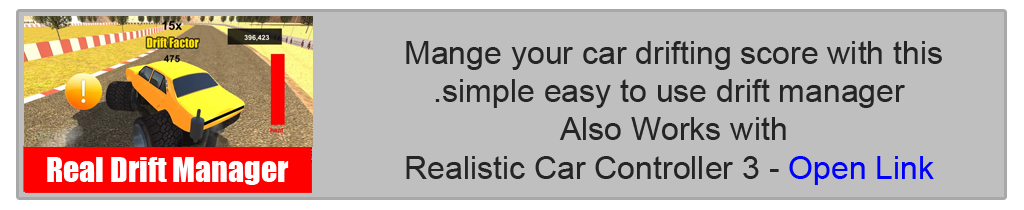
<style>
.page{position:relative;width:1024px;height:210px;background:#bfbfbf}
.page>*{position:absolute;margin:0}
.t1{font:32px "ArialMT";color:#252525}
.t2{font:32px "ArialMT";color:#0000ff}
.t3{font:32px "Impact";color:#ffffff}
</style>
<div class="page">
<p class="t1" style="left:406px;top:41px;width:536px;height:144px;text-align:center">Mange your car drifting score with this <br>simple easy to use drift manager.<br>Also Works with <br>Realistic Car Controller 3 - <span class="t2">Open Link</span></p>
<p class="t3" style="left:47px;top:157px;width:242px;height:28px">Real Drift Manager</p>
</div>
